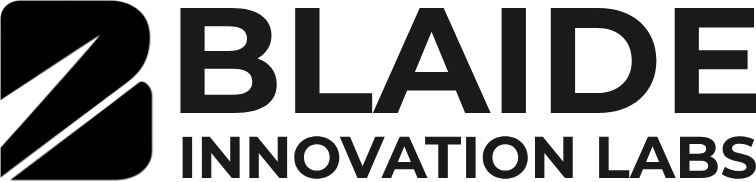
<style>
.page{position:relative;width:756px;height:182px;background:#ffffff}
.page>*{position:absolute;margin:0}
.t1{font:150px "Montserrat-Bold";color:#191b1a}
.t2{font:58.8px "Montserrat-Bold";color:#191b1a}
</style>
<div class="page">
<p class="t1" style="left:180px;top:8px;width:576px;height:105px">BLAIDE</p>
<p class="t2" style="left:182px;top:136px;width:574px;height:43px">INNOVATION LABS</p>
</div>
